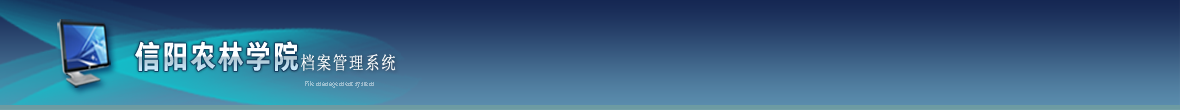
<style>
.page{position:relative;width:1180px;height:110px}
.page>*{position:absolute;margin:0}
.t1{font:31.6px "FZYOUHGB18030_CU--GB1-4";letter-spacing:0.075em;scale:0.81 1}
.t2{font:18px "SimSun";letter-spacing:0.1em;color:#ffffff;scale:0.81 1}
.t3{font:8px "TimesNewRomanPSMT";letter-spacing:0.01em;color:#96bacb;scale:0.81 1}
</style>
<div class="page">
<p class="t1" style="left:135px;top:41px;width:164px;height:31px">信阳农林学院</p>
<p class="t2" style="left:301px;top:54px;width:95px;height:17px">档案管理系统</p>
<p class="t3" style="left:305px;top:81px;width:69px;height:7px">File management system</p>
</div>
